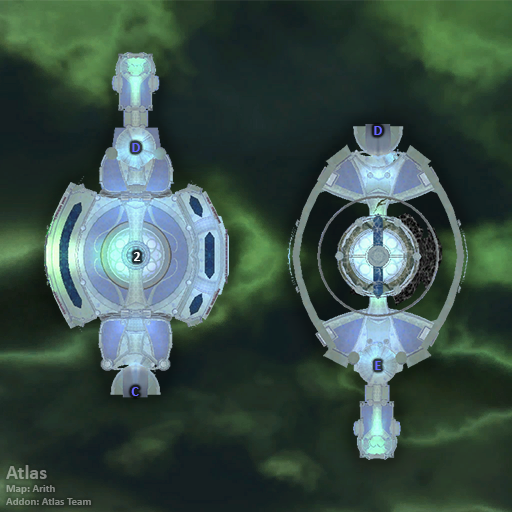
<style>
.page{position:relative;width:512px;height:512px}
.page>*{position:absolute;margin:0}
.t1{font:14px "Calibri-Bold";color:#6666ff}
.t2{font:14px "Calibri-Bold";color:#ffffff}
.t3{font:11px "Calibri-Bold";color:#868f85}
.t4{font:20px "Calibri-Bold";color:#868f85}
</style>
<div class="page">
<p class="t1" style="left:374px;top:126px;width:8px;height:9px">D</p>
<p class="t1" style="left:132px;top:143px;width:8px;height:9px">D</p>
<p class="t2" style="left:134px;top:252px;width:7px;height:9px">2</p>
<p class="t1" style="left:375px;top:361px;width:6px;height:9px">E</p>
<p class="t1" style="left:131px;top:387px;width:8px;height:9px">C</p>
<p class="t3" style="left:6px;top:465px;width:85px;height:40px"><span class="t4">Atlas<br></span>Map: Arith<br>Addon: Atlas Team</p>
</div>
